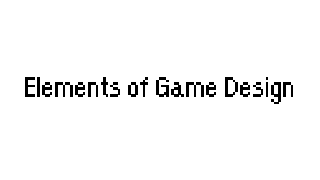
<style>
.page{position:relative;width:320px;height:180px;background:#ffffff}
.page>*{position:absolute;margin:0}
.t1{font:33.3px "OrangeKid-Regular";color:#000000}
</style>
<div class="page">
<p class="t1" style="left:25px;top:77px;width:268px;height:27px">Elements of Game Design</p>
</div>
